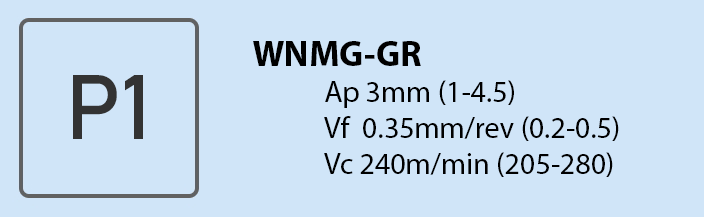
<style>
.page{position:relative;width:704px;height:217px;background:#d0e5f8}
.page>*{position:absolute;margin:0}
.t1{font:30px "MyriadPro-Regular";color:#000000}
.t2{font:36px "MyriadPro-Bold";color:#000000}
</style>
<div class="page">
<p class="t1" style="left:253px;top:41px;width:366px;height:136px"><span class="t2">WNMG-GR<br></span>  Ap 3mm (1-4.5)<br>  Vf  0.35mm/rev (0.2-0.5)<br>  Vc 240m/min (205-280)</p>
</div>
